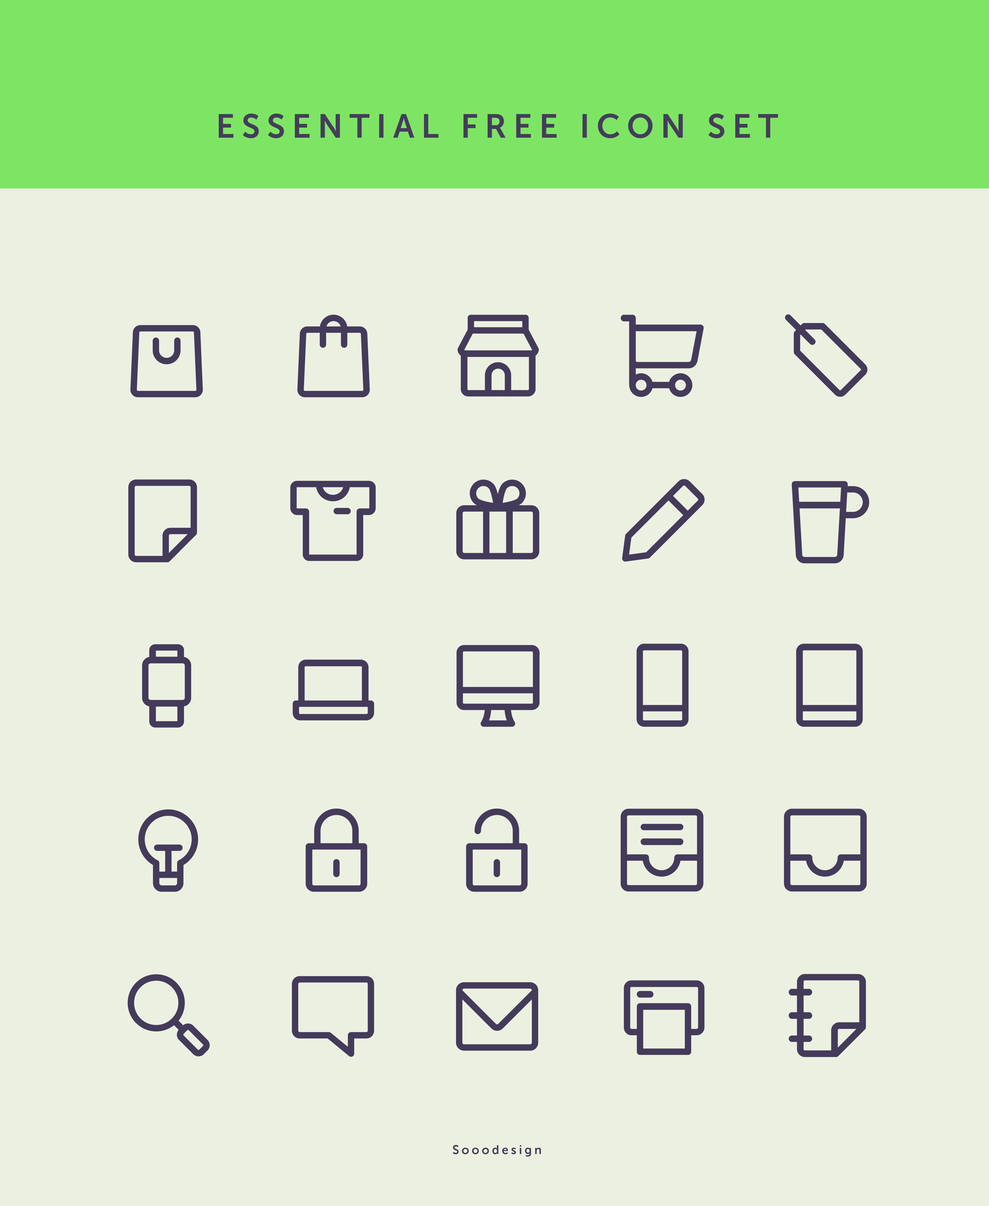
<style>
.page{position:relative;width:989px;height:1206px;background:#ecf0e1}
.page>*{position:absolute;margin:0}
.t1{font:33.3px "MuseoSans-700";letter-spacing:0.2em;color:#453c5c}
.t2{font:12.2px "MuseoSans-700";letter-spacing:0.2em;color:#453c5c}
</style>
<div class="page">
<p class="t1" style="left:219px;top:113px;width:559px;height:25px">ESSENTIAL FREE ICON SET</p>
<p class="t2" style="left:453px;top:1145px;width:88px;height:11px">Sooodesign</p>
</div>
